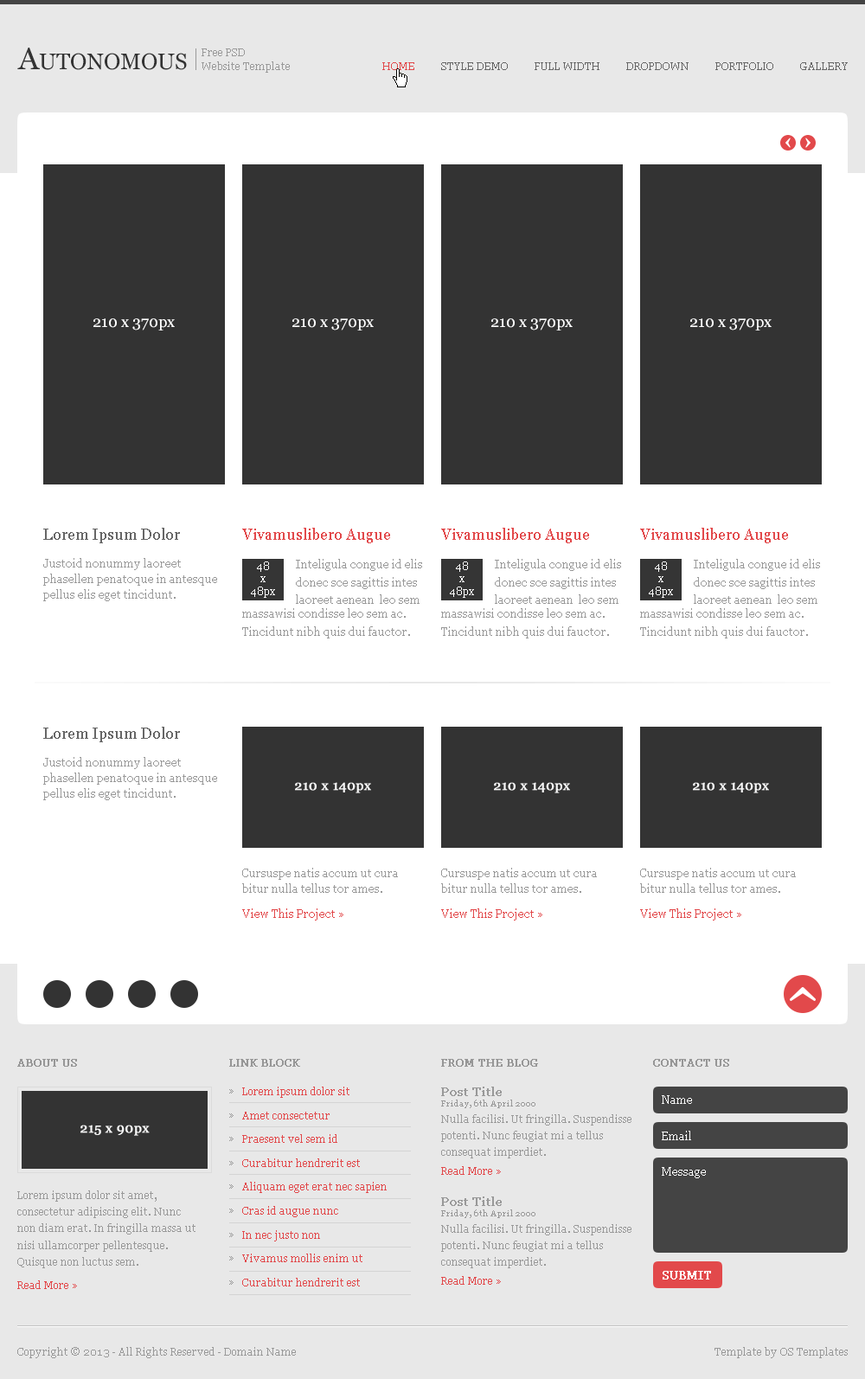
<style>
.page{position:relative;width:865px;height:1379px;background:#ffffff}
.page>*{position:absolute;margin:0}
.t1{font:22.5px "Georgia";color:#333333}
.t2{font:31.1px "Georgia";color:#333333}
.t3{font:10.4px/13.5px "Georgia";color:#999999}
.t4{font:10.4px "Georgia";color:#e2494b}
.t5{font:10.4px "Georgia";color:#666666}
.t6{font:15.6px "Georgia";color:#ffffff}
.t7{font:15.6px "Georgia";color:#666666}
.t8{font:15.6px "Georgia";color:#e2494b}
.t9{font:11.2px/15.7px "Georgia";color:#999999}
.t10{font:10.4px/12.5px "Georgia";color:#ffffff}
.t11{font:11.2px/18px "Georgia";color:#999999}
.t12{font:13.5px "Georgia";color:#f8f8f8;font-weight:bold}
.t13{font:11.2px "Georgia";color:#e2494b}
.t14{font:10.4px "Georgia";color:#979797;font-weight:bold}
.t15{font:10.4px/23.9px "Georgia";color:#989898}
.t16{font:10.4px/23.9px "Georgia";color:#e2494b}
.t17{font:10.4px/16.6px "Georgia";color:#999999}
.t18{font:12.1px/14.5px "Georgia";color:#999999;font-weight:bold}
.t19{font:8.6px/10.4px "Georgia";color:#999999}
.t20{font:11.2px "Georgia";color:#ffffff}
.t21{font:11.2px "Georgia";color:#ffffff;font-weight:bold}
.t22{font:10.4px "Georgia";color:#999999}
</style>
<div class="page">
<p class="t1" style="left:17px;top:48px;width:170px;height:22px"><span class="t2">A</span>UTONOMOUS</p>
<p class="t3" style="left:202px;top:48px;width:88px;height:25px">Free PSD<br>Website Template</p>
<p class="t4" style="left:382px;top:62px;width:32px;height:8px">HOME</p>
<p class="t5" style="left:441px;top:62px;width:67px;height:8px">STYLE DEMO</p>
<p class="t5" style="left:535px;top:62px;width:64px;height:8px">FULL WIDTH</p>
<p class="t5" style="left:626px;top:62px;width:62px;height:8px">DROPDOWN</p>
<p class="t5" style="left:715px;top:62px;width:58px;height:8px">PORTFOLIO</p>
<p class="t5" style="left:800px;top:62px;width:48px;height:8px">GALLERY</p>
<p class="t6" style="left:93px;top:318px;width:82px;height:12px">210 x 370px</p>
<p class="t6" style="left:292px;top:318px;width:82px;height:12px">210 x 370px</p>
<p class="t6" style="left:491px;top:318px;width:82px;height:12px">210 x 370px</p>
<p class="t6" style="left:690px;top:318px;width:82px;height:12px">210 x 370px</p>
<p class="t7" style="left:43px;top:528px;width:137px;height:15px">Lorem Ipsum Dolor</p>
<p class="t8" style="left:242px;top:528px;width:148px;height:15px">Vivamuslibero Augue</p>
<p class="t8" style="left:441px;top:528px;width:148px;height:15px">Vivamuslibero Augue</p>
<p class="t8" style="left:640px;top:528px;width:148px;height:15px">Vivamuslibero Augue</p>
<p class="t9" style="left:43px;top:558px;width:174px;height:43px">Justoid nonummy laoreet phasellen penatoque in antesque pellus elis eget tincidunt.</p>
<p class="t10" style="left:251px;top:561px;width:24px;height:37px;text-align:center">48<br>x<br>48px</p>
<p class="t11" style="left:296px;top:559px;width:126px;height:45px">Inteligula congue id elis donec sce sagittis intes laoreet aenean  leo sem</p>
<p class="t10" style="left:450px;top:561px;width:24px;height:37px;text-align:center">48<br>x<br>48px</p>
<p class="t11" style="left:495px;top:559px;width:126px;height:45px">Inteligula congue id elis donec sce sagittis intes laoreet aenean  leo sem</p>
<p class="t10" style="left:649px;top:561px;width:24px;height:37px;text-align:center">48<br>x<br>48px</p>
<p class="t11" style="left:694px;top:559px;width:126px;height:45px">Inteligula congue id elis donec sce sagittis intes laoreet aenean  leo sem</p>
<p class="t11" style="left:242px;top:608px;width:168px;height:30px">massawisi condisse leo sem ac. Tincidunt nibh quis dui fauctor.</p>
<p class="t11" style="left:441px;top:608px;width:168px;height:30px">massawisi condisse leo sem ac. Tincidunt nibh quis dui fauctor.</p>
<p class="t11" style="left:640px;top:608px;width:168px;height:30px">massawisi condisse leo sem ac. Tincidunt nibh quis dui fauctor.</p>
<p class="t7" style="left:43px;top:727px;width:137px;height:15px">Lorem Ipsum Dolor</p>
<p class="t9" style="left:43px;top:757px;width:174px;height:43px">Justoid nonummy laoreet phasellen penatoque in antesque pellus elis eget tincidunt.</p>
<p class="t12" style="left:295px;top:782px;width:76px;height:11px">210 x 140px</p>
<p class="t12" style="left:494px;top:782px;width:76px;height:11px">210 x 140px</p>
<p class="t12" style="left:693px;top:782px;width:76px;height:11px">210 x 140px</p>
<p class="t9" style="left:242px;top:868px;width:156px;height:25px">Cursuspe natis accum ut cura bitur nulla tellus tor ames.</p>
<p class="t9" style="left:441px;top:868px;width:156px;height:25px">Cursuspe natis accum ut cura bitur nulla tellus tor ames.</p>
<p class="t9" style="left:640px;top:868px;width:156px;height:25px">Cursuspe natis accum ut cura bitur nulla tellus tor ames.</p>
<p class="t13" style="left:242px;top:908px;width:101px;height:12px">View This Project »</p>
<p class="t13" style="left:441px;top:908px;width:101px;height:12px">View This Project »</p>
<p class="t13" style="left:640px;top:908px;width:101px;height:12px">View This Project »</p>
<p class="t14" style="left:17px;top:1059px;width:60px;height:7px">ABOUT US</p>
<p class="t14" style="left:229px;top:1059px;width:71px;height:7px">LINK BLOCK</p>
<p class="t14" style="left:441px;top:1059px;width:97px;height:7px">FROM THE BLOG</p>
<p class="t14" style="left:653px;top:1059px;width:76px;height:7px">CONTACT US</p>
<p class="t15" style="left:229px;top:1089px;width:5px;height:195px">»<br>»<br>»<br>»<br>»<br>»<br>»<br>»<br>»</p>
<p class="t16" style="left:242px;top:1086px;width:145px;height:200px">Lorem ipsum dolor sit<br>Amet consectetur<br>Praesent vel sem id<br>Curabitur hendrerit est<br>Aliquam eget erat nec sapien<br>Cras id augue nunc<br>In nec justo non<br>Vivamus mollis enim ut<br>Curabitur hendrerit est</p>
<p class="t17" style="left:441px;top:1086px;width:190px;height:72px"><span class="t18">Post Title<br></span><span class="t19">Friday, 6th April 2000<br></span>Nulla facilisi. Ut fringilla. Suspendisse potenti. Nunc feugiat mi a tellus consequat imperdiet.</p>
<p class="t20" style="left:662px;top:1095px;width:30px;height:9px">Name</p>
<p class="t12" style="left:80px;top:1124px;width:70px;height:12px">215 x 90px</p>
<p class="t20" style="left:662px;top:1130px;width:29px;height:10px">Email</p>
<p class="t4" style="left:441px;top:1166px;width:60px;height:9px">Read More »</p>
<p class="t20" style="left:662px;top:1167px;width:44px;height:11px">Message</p>
<p class="t17" style="left:17px;top:1190px;width:178px;height:78px">Lorem ipsum dolor sit amet, consectetur adipiscing elit. Nunc non diam erat. In fringilla massa ut nisi ullamcorper pellentesque. Quisque non luctus sem.</p>
<p class="t17" style="left:441px;top:1196px;width:190px;height:72px"><span class="t18">Post Title<br></span><span class="t19">Friday, 6th April 2000<br></span>Nulla facilisi. Ut fringilla. Suspendisse potenti. Nunc feugiat mi a tellus consequat imperdiet.</p>
<p class="t4" style="left:441px;top:1276px;width:60px;height:8px">Read More »</p>
<p class="t21" style="left:663px;top:1271px;width:48px;height:8px">SUBMIT</p>
<p class="t4" style="left:17px;top:1280px;width:60px;height:9px">Read More »</p>
<p class="t22" style="left:17px;top:1347px;width:279px;height:11px">Copyright © 2013 - All Rights Reserved - Domain Name</p>
<p class="t22" style="left:714px;top:1347px;width:134px;height:11px">Template by OS Templates</p>
</div>
